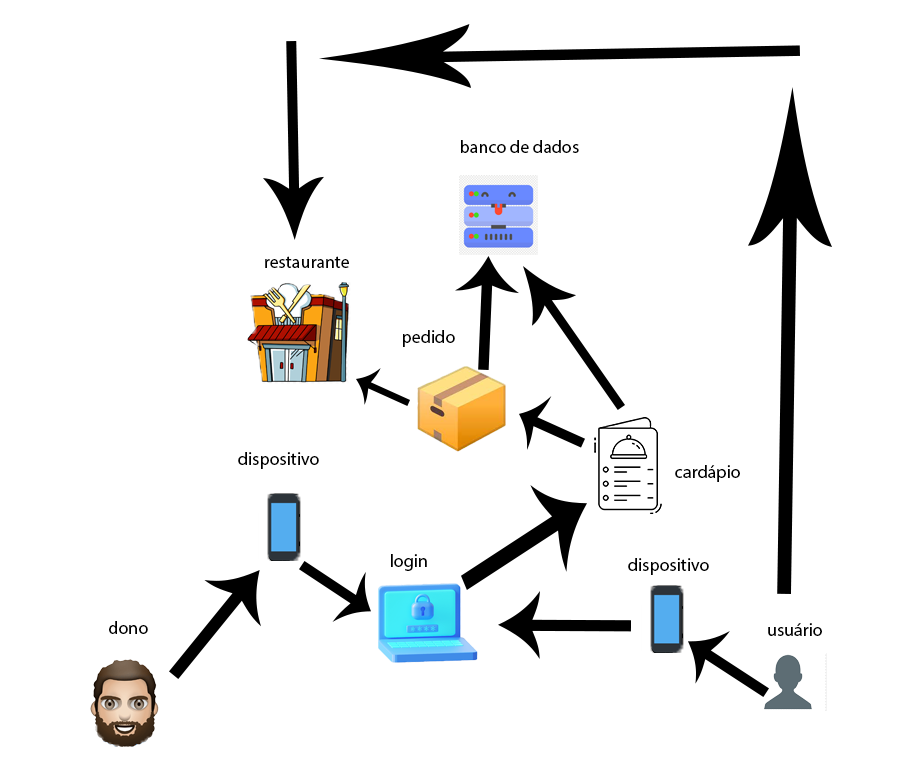
<style>
.page{position:relative;width:900px;height:765px;background:#ffffff}
.page>*{position:absolute;margin:0}
.t1{font:18px "MyriadPro-Regular";color:#000000}
</style>
<div class="page">
<p class="t1" style="left:461px;top:140px;width:118px;height:13px">banco de dados</p>
<p class="t1" style="left:265px;top:256px;width:84px;height:12px">restaurante</p>
<p class="t1" style="left:403px;top:330px;width:52px;height:17px">pedido</p>
<p class="t1" style="left:238px;top:452px;width:81px;height:17px">dispositivo</p>
<p class="t1" style="left:675px;top:465px;width:65px;height:17px">cardápio</p>
<p class="t1" style="left:391px;top:554px;width:36px;height:17px">login</p>
<p class="t1" style="left:628px;top:558px;width:81px;height:17px">dispositivo</p>
<p class="t1" style="left:109px;top:621px;width:39px;height:13px">dono</p>
<p class="t1" style="left:768px;top:623px;width:54px;height:13px">usuário</p>
</div>
